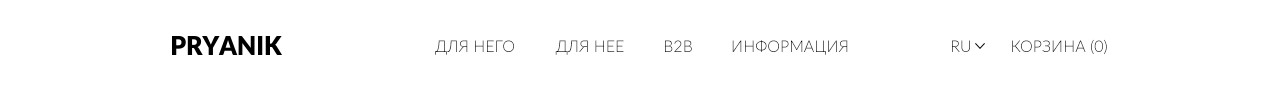
<style>
.page{position:relative;width:1280px;height:100px;background:#ffffff}
.page>*{position:absolute;margin:0}
.t1{font:16px "Lato-Light";text-transform:uppercase}
.t2{font:16px "Lato-Light";color:#000000;text-transform:uppercase}
</style>
<div class="page">
<p class="t1" style="left:435px;top:40px;width:79px;height:15px">Для него</p>
<p class="t2" style="left:555px;top:40px;width:69px;height:15px">Для нее</p>
<p class="t1" style="left:665px;top:40px;width:27px;height:12px">B2b</p>
<p class="t2" style="left:732px;top:40px;width:116px;height:15px">Информация</p>
<p class="t1" style="left:952px;top:40px;width:18px;height:12px">ru</p>
<p class="t1" style="left:1012px;top:39px;width:95px;height:15px">Корзина (0)</p>
</div>
